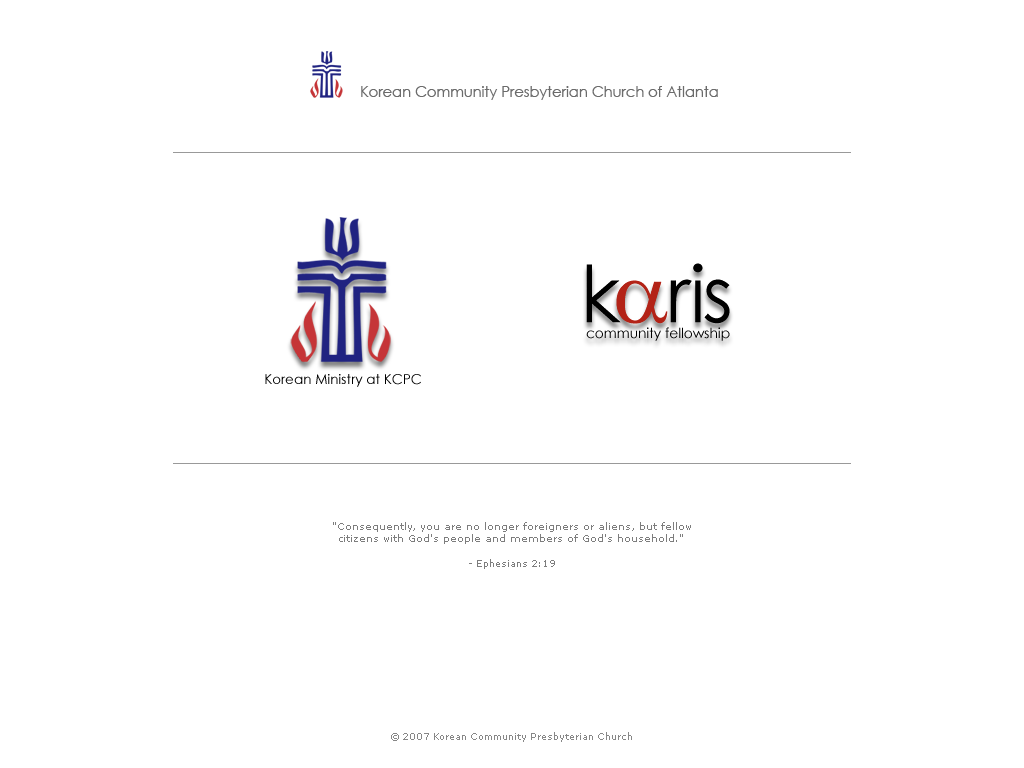
<style>
.page{position:relative;width:1024px;height:768px;background:#ffffff}
.page>*{position:absolute;margin:0}
.t1{font:14.6px "CenturyGothic";color:#6b6b6b}
.t2{font:13.5px "CenturyGothic";color:#000000}
.t3{font:10.4px/12.5px "Verdana";color:#7d7d7d}
.t4{font:9.4px/12.5px "Verdana";color:#7d7d7d}
.t5{font:9.4px "Verdana";color:#878787}
</style>
<div class="page">
<p class="t1" style="left:361px;top:86px;width:357px;height:14px">Korean Community Presbyterian Church of Atlanta</p>
<p class="t2" style="left:265px;top:374px;width:156px;height:13px">Korean Ministry at KCPC</p>
<p class="t3" style="left:333px;top:522px;width:358px;height:47px;text-align:center">"Consequently, you are no longer foreigners or aliens, but fellow citizens with God's people and members of God's household."<br><br><span class="t4">- Ephesians 2:19</span></p>
<p class="t5" style="left:391px;top:732px;width:241px;height:10px">© 2007 Korean Community Presbyterian Church</p>
</div>
